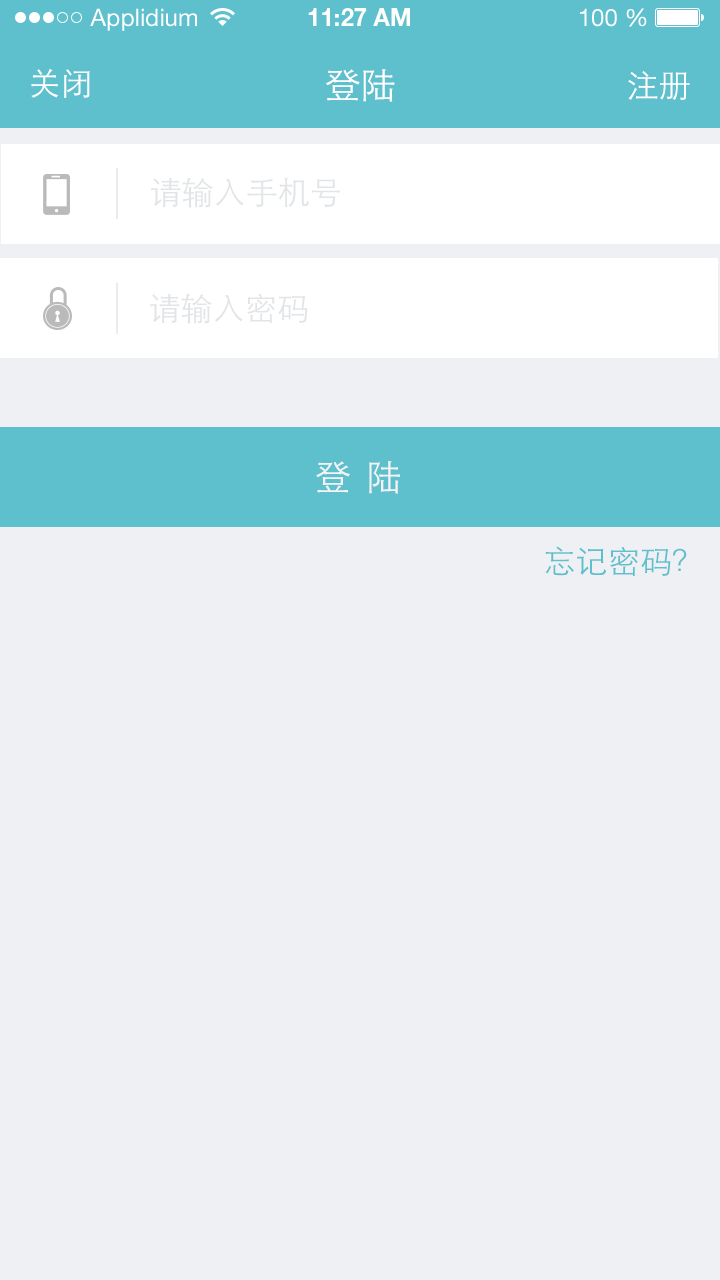
<style>
.page{position:relative;width:720px;height:1280px;background:#eff0f4}
.page>*{position:absolute;margin:0}
.t1{font:32px "STHeitiSC-Light";color:#ffffff}
.t2{font:36px "STHeitiSC-Light";color:#ffffff}
.t3{font:32px "STHeitiSC-Light";color:#e1e5e7}
.t4{font:36px "STHeitiSC-Light";letter-spacing:-0.08em;color:#f3f4f6}
.t5{font:32px "STHeitiSC-Light";color:#5fc0cd}
</style>
<div class="page">
<p class="t1" style="left:31px;top:68px;width:59px;height:30px">关闭</p>
<p class="t2" style="left:325px;top:69px;width:70px;height:33px">登陆</p>
<p class="t1" style="left:628px;top:71px;width:62px;height:29px">注册</p>
<p class="t3" style="left:151px;top:177px;width:189px;height:31px">请输入手机号</p>
<p class="t3" style="left:150px;top:293px;width:158px;height:31px">请输入密码</p>
<p class="t4" style="left:316px;top:461px;width:84px;height:33px">登   陆</p>
<p class="t5" style="left:545px;top:546px;width:142px;height:30px">忘记密码？</p>
</div>
